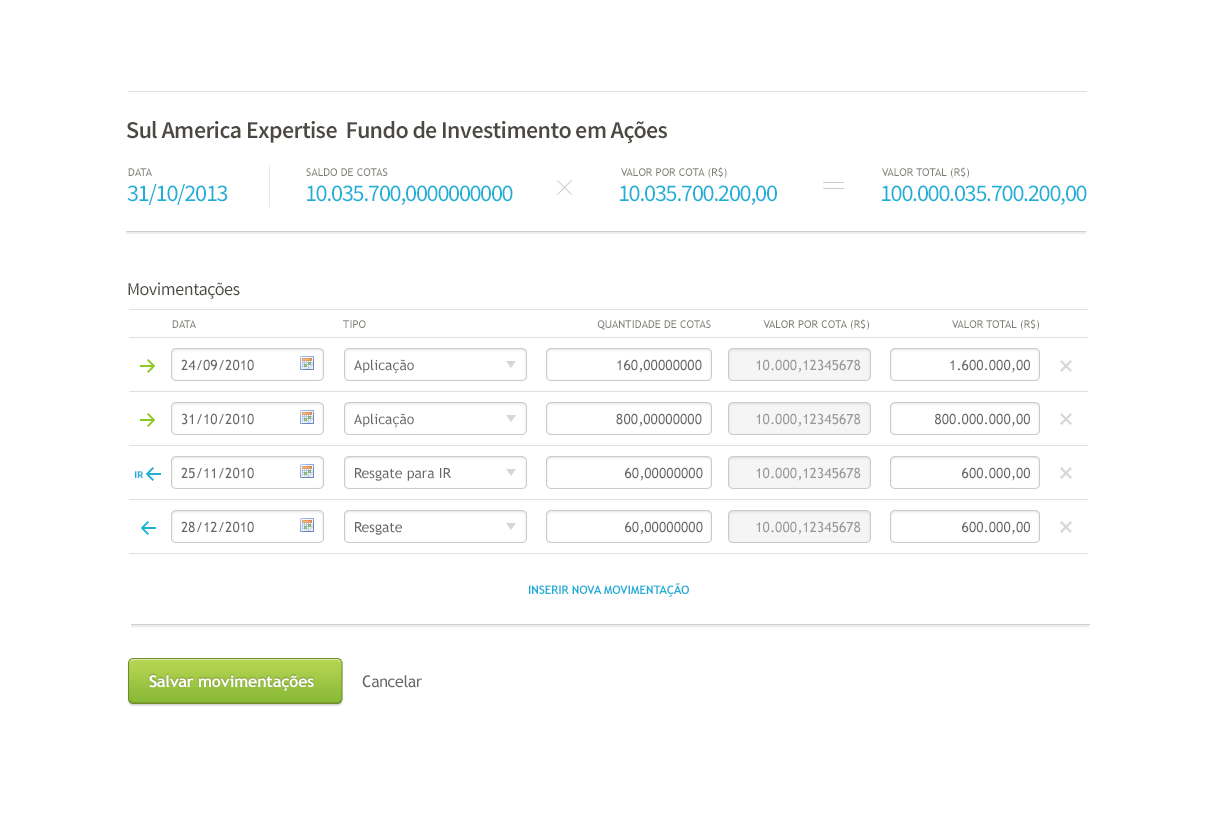
<style>
.page{position:relative;width:1216px;height:833px;background:#ffffff}
.page>*{position:absolute;margin:0}
.t1{font:24px "SourceSansPro-Semibold";letter-spacing:-0.025em;color:#4b4942}
.t2{font:11px "TrebuchetMS";color:#7f7c76;text-transform:uppercase}
.t3{font:24px "SourceSansPro-Regular";letter-spacing:-0.05em;color:#1eafd7}
.t4{font:18px "SourceSansPro-Regular";letter-spacing:-0.025em;color:#4b4942}
.t5{font:14px "TrebuchetMS";color:#666666}
.t6{font:14px "TrebuchetMS";color:#989898}
.t7{font:10px "SourceSansPro-Bold";color:#1eafd7}
.t8{font:12px "TrebuchetMS-Bold";letter-spacing:-0.025em;color:#1eafd7;text-transform:uppercase}
.t9{font:16px "TrebuchetMS-Bold";letter-spacing:-0.01em;color:#ffffff}
.t10{font:16px "TrebuchetMS";letter-spacing:-0.025em;color:#666666}
</style>
<div class="page">
<p class="t1" style="left:126px;top:121px;width:541px;height:23px">Sul America Expertise  Fundo de Investimento em Ações</p>
<p class="t2" style="left:128px;top:168px;width:24px;height:8px">Data</p>
<p class="t2" style="left:306px;top:168px;width:82px;height:8px">SALDO de cotas</p>
<p class="t2" style="left:621px;top:167px;width:106px;height:12px">Valor POR COta (R$)</p>
<p class="t2" style="left:882px;top:167px;width:87px;height:12px">Valor total (R$)</p>
<p class="t3" style="left:127px;top:184px;width:101px;height:21px">31/10/2013</p>
<p class="t3" style="left:307px;top:185px;width:206px;height:20px">10.035.700,0000000000</p>
<p class="t3" style="left:620px;top:185px;width:157px;height:20px">10.035.700.200,00</p>
<p class="t3" style="left:882px;top:185px;width:205px;height:20px">100.000.035.700.200,00</p>
<p class="t4" style="left:128px;top:282px;width:112px;height:17px">Movimentações</p>
<p class="t2" style="left:172px;top:320px;width:24px;height:8px">Data</p>
<p class="t2" style="left:343px;top:320px;width:23px;height:8px">Tipo</p>
<p class="t2" style="left:597px;top:320px;width:114px;height:10px">Quantidade de cotas</p>
<p class="t2" style="left:763px;top:319px;width:106px;height:12px">Valor por cota (R$)</p>
<p class="t2" style="left:952px;top:319px;width:87px;height:12px">Valor total (R$)</p>
<p class="t5" style="left:181px;top:359px;width:73px;height:12px">24/09/2010</p>
<p class="t5" style="left:354px;top:359px;width:60px;height:15px">Aplicação</p>
<p class="t5" style="left:617px;top:359px;width:85px;height:14px">160,00000000</p>
<p class="t6" style="left:756px;top:359px;width:105px;height:14px">10.000,12345678</p>
<p class="t5" style="left:950px;top:359px;width:80px;height:14px">1.600.000,00</p>
<p class="t5" style="left:181px;top:413px;width:73px;height:12px">31/10/2010</p>
<p class="t5" style="left:354px;top:413px;width:60px;height:15px">Aplicação</p>
<p class="t5" style="left:616px;top:413px;width:86px;height:14px">800,00000000</p>
<p class="t6" style="left:756px;top:413px;width:105px;height:14px">10.000,12345678</p>
<p class="t5" style="left:935px;top:413px;width:95px;height:14px">800.000.000,00</p>
<p class="t7" style="left:135px;top:471px;width:8px;height:7px">IR</p>
<p class="t5" style="left:181px;top:467px;width:73px;height:12px">25/11/2010</p>
<p class="t5" style="left:355px;top:468px;width:96px;height:13px">Resgate para IR</p>
<p class="t5" style="left:625px;top:467px;width:78px;height:14px">60,00000000</p>
<p class="t6" style="left:756px;top:467px;width:105px;height:14px">10.000,12345678</p>
<p class="t5" style="left:962px;top:467px;width:68px;height:14px">600.000,00</p>
<p class="t5" style="left:181px;top:521px;width:73px;height:12px">28/12/2010</p>
<p class="t5" style="left:625px;top:521px;width:78px;height:14px">60,00000000</p>
<p class="t6" style="left:756px;top:521px;width:105px;height:14px">10.000,12345678</p>
<p class="t5" style="left:962px;top:521px;width:68px;height:14px">600.000,00</p>
<p class="t5" style="left:355px;top:522px;width:47px;height:13px">Resgate</p>
<p class="t8" style="left:529px;top:583px;width:160px;height:14px">INserir nova movimentação</p>
<p class="t9" style="left:149px;top:675px;width:165px;height:16px">Salvar movimentações</p>
<p class="t10" style="left:362px;top:675px;width:60px;height:13px">Cancelar</p>
</div>
